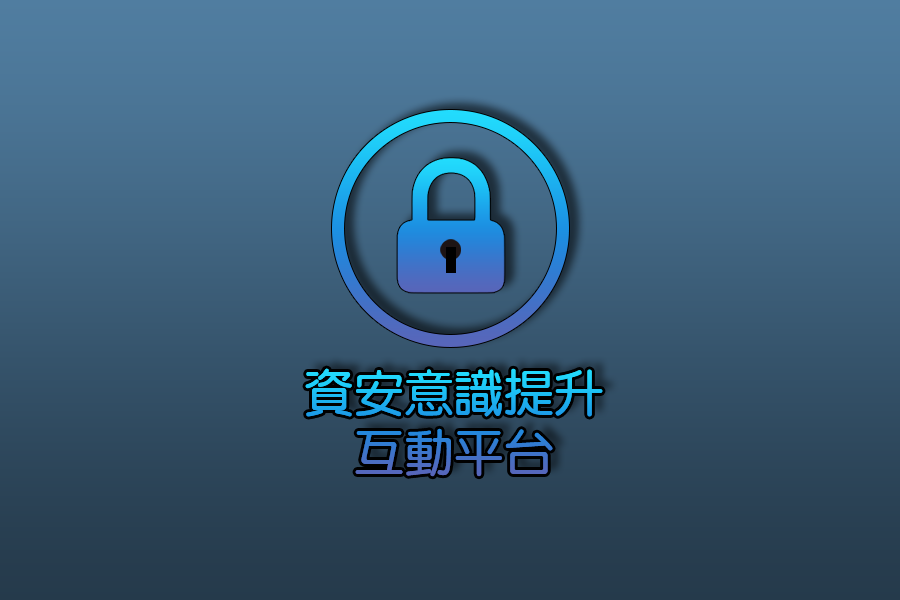
<style>
.page{position:relative;width:900px;height:600px}
.page>*{position:absolute;margin:0}
.t1{font:50px "YenRound-Bold"}
</style>
<div class="page">
<p class="t1" style="left:305px;top:368px;width:298px;height:109px;text-align:center">資安意識提升<br>互動平台</p>
</div>
